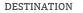
<style>
.page{position:relative;width:83px;height:13px;background:#ffffff}
.page>*{position:absolute;margin:0}
.t1{font:11px "Cambria";color:#525252}
</style>
<div class="page">
<p class="t1" style="left:5px;top:3px;width:68px;height:7px">DESTINATION</p>
</div>
